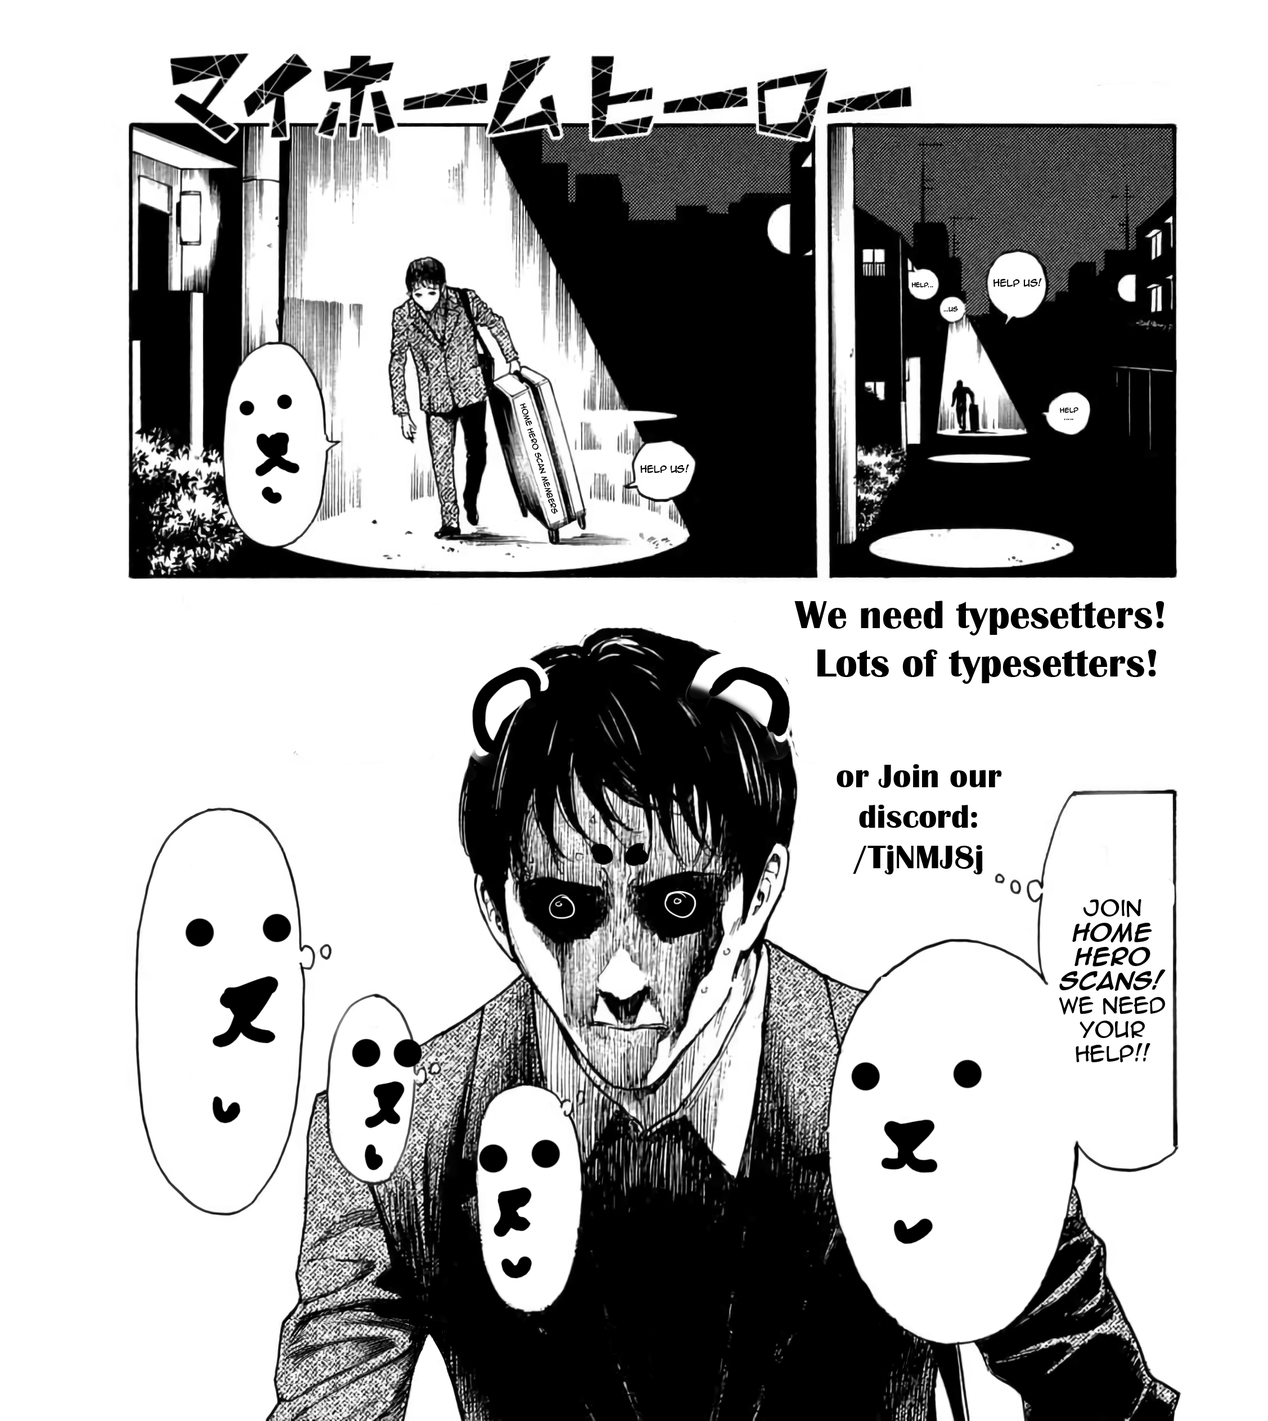
<style>
.page{position:relative;width:1268px;height:1421px;background:#ffffff}
.page>*{position:absolute;margin:0}
.t1{font:9px "AnimeAce2.0BB";color:#000000}
.t2{font:5.6px "AnimeAce2.0BB";color:#000000}
.t3{font:6.7px "AnimeAce2.0BB";color:#000000}
.t4{font:6.2px "AnimeAce2.0BB";color:#000000}
.t5{font:40.5px "BritannicBold";color:#000000}
.t6{font:33.8px "BritannicBold";color:#000000}
.t7{font:20.2px "AnimeAce2.0BB";color:#000000}
.t8{font:20.2px "AnimeAce2.0BB-Bold";color:#000000}
</style>
<div class="page">
<p class="t1" style="left:993px;top:278px;width:49px;height:9px">Help Us!</p>
<p class="t2" style="left:912px;top:282px;width:21px;height:5px">Help...</p>
<p class="t2" style="left:943px;top:307px;width:15px;height:5px">...Us</p>
<p class="t3" style="left:520px;top:403px;width:38px;height:111px;rotate:74deg">Home Hero Scan Members</p>
<p class="t4" style="left:1060px;top:407px;width:18px;height:13px;text-align:center">Help<br>.....</p>
<p class="t1" style="left:640px;top:465px;width:49px;height:8px">Help Us!</p>
<p class="t5" style="left:794px;top:601px;width:370px;height:83px;text-align:center">We need typesetters! <br>Lots of typesetters!</p>
<p class="t6" style="left:836px;top:764px;width:166px;height:111px;text-align:center">or Join our <br>discord: <br>/TjNMJ8j</p>
<p class="t7" style="left:1059px;top:899px;width:107px;height:164px;text-align:center">Join <span class="t8">Home Hero Scans! </span>We need your help!!</p>
</div>
